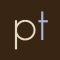
<style>
.page{position:relative;width:60px;height:60px;background:#382513}
.page>*{position:absolute;margin:0}
.t1{font:48px "GeosansLight";color:#e5dbc5}
.t2{font:48px "GeosansLight";color:#a8b6d8}
</style>
<div class="page">
<p class="t1" style="left:14px;top:11px;width:34px;height:39px">p<span class="t2">t</span></p>
</div>
